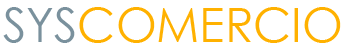
<style>
.page{position:relative;width:345px;height:48px;background:#ffffff}
.page>*{position:absolute;margin:0}
.t1{font:46.9px "CenturyGothic";color:#ffb100}
.t2{font:46.9px "CenturyGothic";color:#7a919d}
</style>
<div class="page">
<p class="t1" style="left:3px;top:7px;width:338px;height:36px"><span class="t2">SYS</span>COMERCIO</p>
</div>
